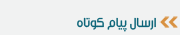
<style>
.page{position:relative;width:180px;height:35px;background:#f1f2f2}
.page>*{position:absolute;margin:0}
.t1{font:14px "Mj_Flow";letter-spacing:-0.001em;color:#0d6579}
</style>
<div class="page">
<p class="t1" style="left:77px;top:17px;width:79px;height:15px">ارسال پیام کوتاه</p>
</div>
